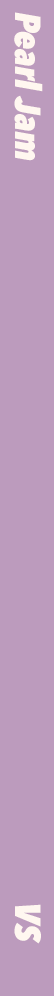
<style>
.page{position:relative;width:54px;height:996px;background:#bc9bbd}
.page>*{position:absolute;margin:0}
.t1{font:36px "AvenirNextCondensed-HeavyItalic";color:#fff7f0}
</style>
<div class="page">
<p class="t1" style="left:14px;top:12px;width:29px;height:932px;rotate:90deg">Pearl Jam                                                                                                       VS</p>
</div>
